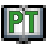
<style>
.page{position:relative;width:48px;height:48px;background:#ffffff}
.page>*{position:absolute;margin:0}
.t1{font:33px "AbadiMT-CondensedExtraBold"}
</style>
<div class="page">
<p class="t1" style="left:9px;top:11px;width:29px;height:22px">PT</p>
</div>
